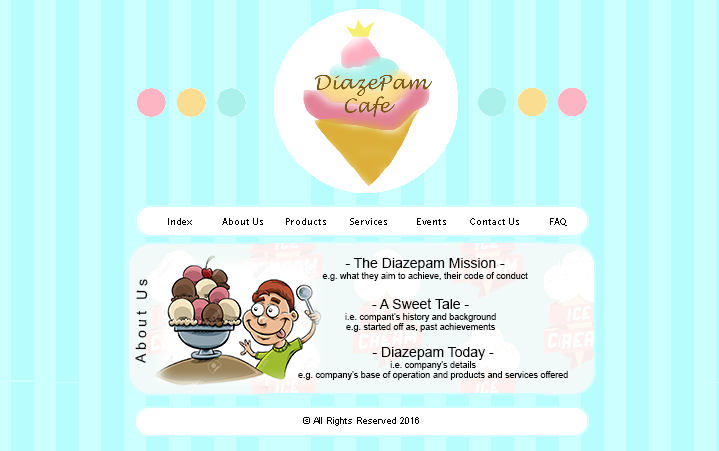
<style>
.page{position:relative;width:719px;height:451px;background:#ccffff}
.page>*{position:absolute;margin:0}
.t1{font:9px "ArialMT";color:#030303}
.t2{font:14px "ArialMT";color:#030303}
</style>
<div class="page">
<p class="t1" style="left:322px;top:258px;width:206px;height:23px;text-align:center"><span class="t2">- The Diazepam Mission -<br></span>e.g. what they aim to achieve, their code of conduct</p>
<p class="t2" style="left:135px;top:279px;width:13px;height:84px;rotate:-89deg">A b o u t   U s</p>
<p class="t1" style="left:345px;top:298px;width:151px;height:34px;text-align:center"><span class="t2">- A Sweet Tale -<br></span>i.e. compant’s history and background<br>e.g. started off as, past achievements</p>
<p class="t1" style="left:298px;top:347px;width:270px;height:33px;text-align:center"><span class="t2">- Diazepam Today -<br></span>i.e. company’s details<br>e.g. company’s base of operation and products and services offered</p>
</div>
